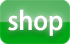
<style>
.page{position:relative;width:70px;height:44px}
.page>*{position:absolute;margin:0}
.t1{font:25px "AdobeHeitiStd-Regular";color:#ffffff}
</style>
<div class="page">
<p class="t1" style="left:8px;top:9px;width:55px;height:27px">shop</p>
</div>
